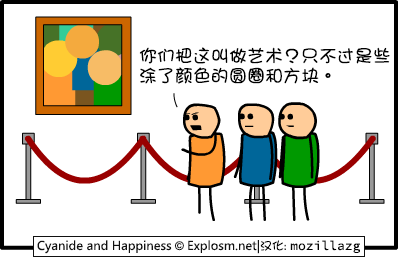
<style>
.page{position:relative;width:399px;height:258px;background:#ffffff}
.page>*{position:absolute;margin:0}
.t1{font:18px/20px "DFGirl";color:#000000}
</style>
<div class="page">
<p class="t1" style="left:139px;top:47px;width:251px;height:37px">你们把这叫做艺术？只不过是些<br>涂了颜色的圆圈和方块。</p>
</div>
